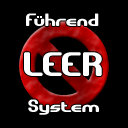
<style>
.page{position:relative;width:128px;height:128px;background:#000000}
.page>*{position:absolute;margin:0}
.t1{font:34px "GravitateBRK";color:#ffffff}
.t2{font:18px "GravitateBRK";color:#ffffff}
</style>
<div class="page">
<p class="t1" style="left:24px;top:52px;width:78px;height:24px">LEER</p>
<p class="t2" style="left:28px;top:99px;width:71px;height:16px">System</p>
</div>
